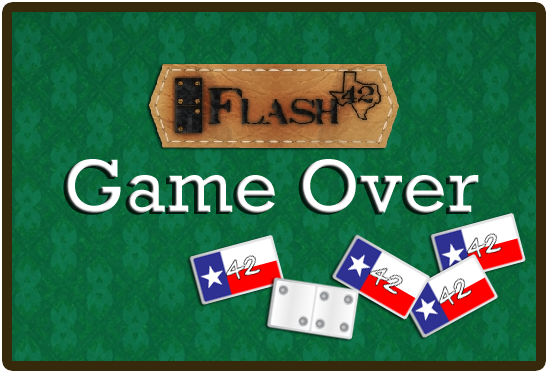
<style>
.page{position:relative;width:548px;height:373px}
.page>*{position:absolute;margin:0}
.t1{font:76.6px "Rockwell";letter-spacing:0.01em;color:#ffffff}
</style>
<div class="page">
<p class="t1" style="left:66px;top:159px;width:413px;height:54px">Game Over</p>
</div>
